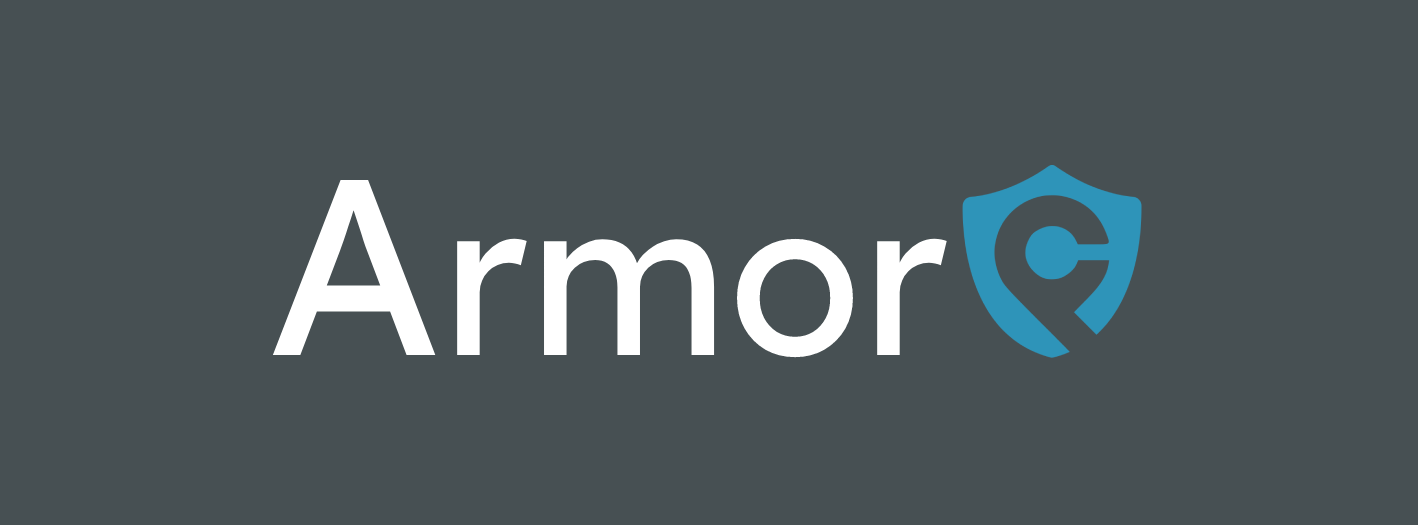
<style>
.page{position:relative;width:1418px;height:525px;background:#475053}
.page>*{position:absolute;margin:0}
.t1{font:216.7px "LexendDeca-Regular";color:#ffffff}
.t2{font:250px "LexendDeca-Regular";color:#ffffff}
</style>
<div class="page">
<p class="t1" style="left:272px;top:180px;width:675px;height:178px"><span class="t2">A</span>rmor</p>
</div>
